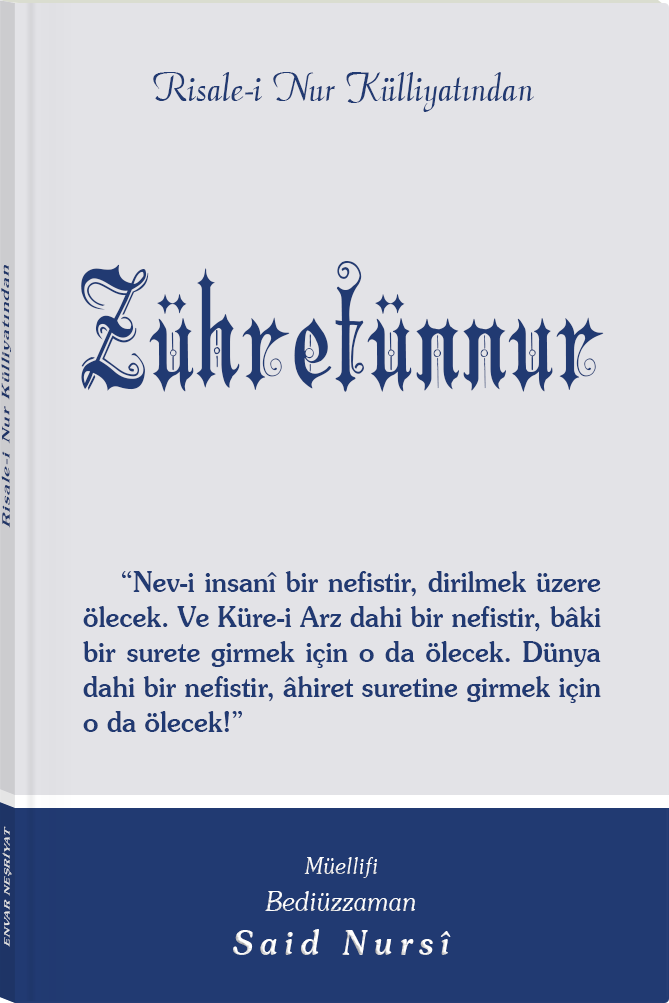
<style>
.page{position:relative;width:669px;height:1003px;background:#e3e3e7}
.page>*{position:absolute;margin:0}
.t1{font:45.3px "Barla © 072 Aria ScriptScriptSSi";color:#213a72;scale:0.94 1}
.t2{font:11.4px "Souvenir-Medium";letter-spacing:0.08em;color:#213a72;scale:1.65 1}
.t3{font:159.7px "Barla © 001 Liva Nur";letter-spacing:-0.001em;color:#213a72;scale:0.93 1}
.t4{font:28.3px/35px "Souvenir-Medium";color:#213a72;scale:0.92 1}
.t5{font:8.3px "Souvenir-Medium";letter-spacing:0.08em;color:#e5e5e5;scale:1.43 1}
.t6{font:27.1px/37.8px "Souvenir-LightItalic";color:#ffffff;scale:0.92 1}
.t7{font:22.8px/39.8px "Souvenir-LightItalic";color:#ffffff;scale:0.92 1}
.t8{font:33.9px/43.8px "Souvenir-MediumItalic";letter-spacing:0.2em;color:#ffffff;scale:0.92 1}
</style>
<div class="page">
<p class="t1" style="left:153px;top:72px;width:381px;height:40px">Risale-i Nur Külliyatından</p>
<p class="t2" style="left:1px;top:265px;width:10px;height:263px;rotate:-90deg">Risale-i Nur Külliyatından</p>
<p class="t3" style="left:81px;top:261px;width:523px;height:131px">Zühretünnur</p>
<p class="t4" style="left:83px;top:571px;width:518px;height:161px;text-align:justify">“Nev-i insanî bir nefistir, dirilmek üzere ölecek. Ve Küre-i Arz dahi bir nefistir, bâki bir surete girmek için o da ölecek. Dünya dahi bir nefistir, âhiret suretine girmek için o da ölecek!”</p>
<p class="t5" style="left:2px;top:826px;width:10px;height:121px;rotate:-90deg">ENVAR NEŞRİYAT</p>
<p class="t6" style="left:233px;top:857px;width:218px;height:98px;text-align:center"><span class="t7">Müellifi<br></span>Bediüzzaman<br><span class="t8">Said Nursî</span></p>
</div>
